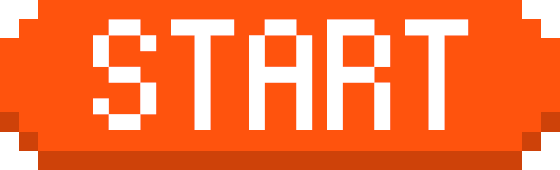
<style>
.page{position:relative;width:560px;height:170px;background:#ff530d}
.page>*{position:absolute;margin:0}
.t1{font:142px "Peepo";color:#ffffff}
</style>
<div class="page">
<p class="t1" style="left:93px;top:19px;width:376px;height:111px">START</p>
</div>
